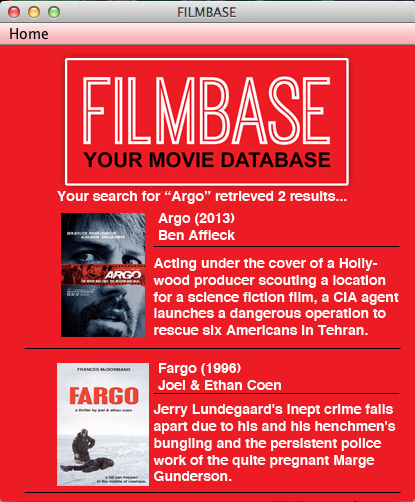
<style>
.page{position:relative;width:415px;height:502px;background:#ed1c24}
.page>*{position:absolute;margin:0}
.t1{font:14px "Helvetica-Bold";color:#ffffff}
</style>
<div class="page">
<p class="t1" style="left:57px;top:191px;width:290px;height:13px">Your search for “Argo” retrieved 2 results...</p>
<p class="t1" style="left:158px;top:213px;width:77px;height:27px">Argo (2013)<br>Ben Affleck</p>
<p class="t1" style="left:153px;top:258px;width:246px;height:77px">Acting under the cover of a Hollywood producer scouting a location for a science fiction film, a CIA agent launches a dangerous operation to rescue six Americans in Tehran. during the U.S. hostage crisis in Iran in 1980.</p>
<p class="t1" style="left:158px;top:363px;width:123px;height:27px">Fargo (1996)<br>Joel &amp; Ethan Coen</p>
<p class="t1" style="left:153px;top:404px;width:243px;height:77px">Jerry Lundegaard's inept crime falls apart due to his and his henchmen's bungling and the persistent police work of the quite pregnant Marge Gunderson.</p>
</div>
